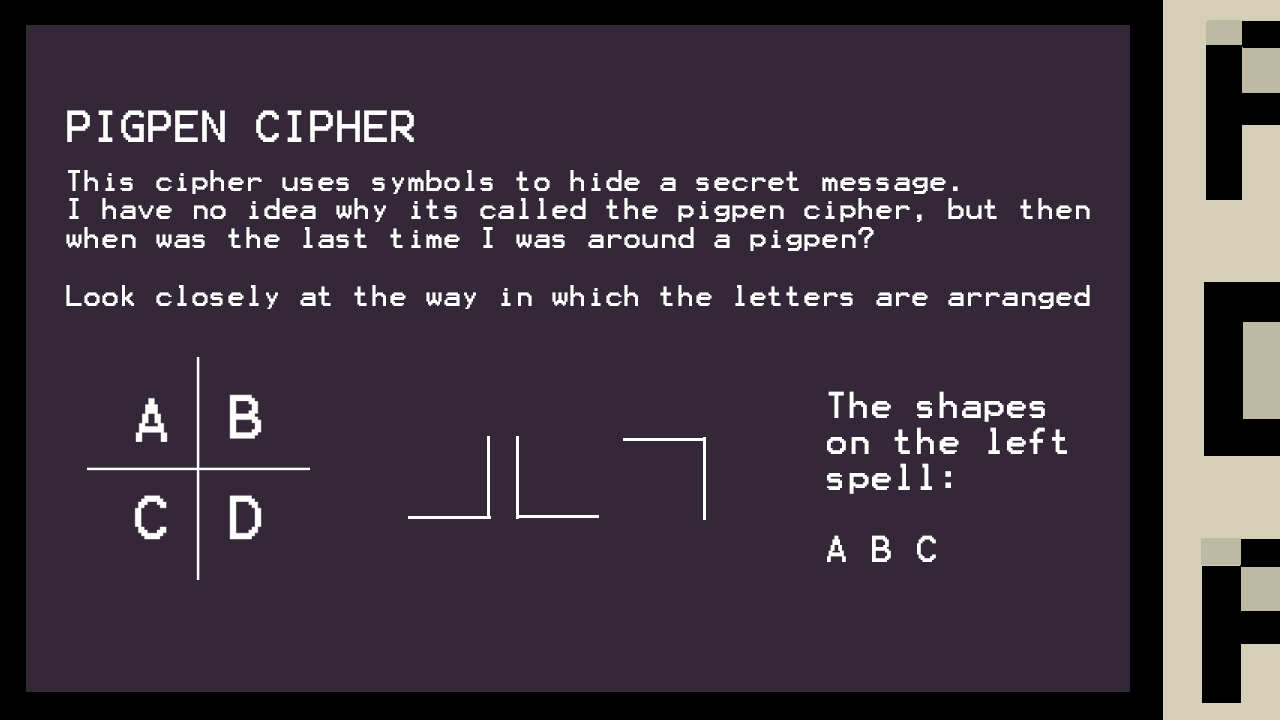
<style>
.page{position:relative;width:1280px;height:720px;background:#342838}
.page>*{position:absolute;margin:0}
.t1{font:36px "Terminal";color:#ffffff}
.t2{font:24px "Terminal";color:#ffffff}
.t3{font:30px "Terminal";color:#ffffff}
</style>
<div class="page">
<p class="t1" style="left:67px;top:110px;width:347px;height:32px">PIGPEN CIPHER</p>
<p class="t2" style="left:66px;top:170px;width:1024px;height:139px">This cipher uses symbols to hide a secret message.<br>I have no idea why its called the pigpen cipher, but then when was the last time I was around a pigpen?<br><br>Look closely at the way in which the letters are arranged</p>
<p class="t3" style="left:827px;top:391px;width:240px;height:171px">The shapes on the left spell:<br><br>A B C</p>
</div>
